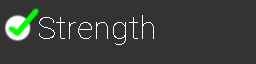
<style>
.page{position:relative;width:256px;height:64px;background:#333333}
.page>*{position:absolute;margin:0}
.t1{font:32px "Roboto-Thin";color:#ffffff}
</style>
<div class="page">
<p class="t1" style="left:39px;top:15px;width:115px;height:30px">Strength</p>
</div>
